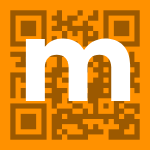
<style>
.page{position:relative;width:150px;height:150px;background:#ff9100}
.page>*{position:absolute;margin:0}
.t1{font:111px "Poppins-Bold";color:#ffffff}
</style>
<div class="page">
<p class="t1" style="left:25px;top:38px;width:106px;height:63px">m</p>
</div>
